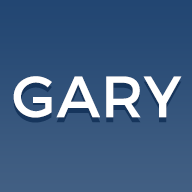
<style>
.page{position:relative;width:192px;height:192px}
.page>*{position:absolute;margin:0}
.t1{font:58px "Montserrat-Regular";letter-spacing:0.015em;color:#ffffff}
.t2{font:58px "Montserrat-Regular";letter-spacing:0.015em}
</style>
<div class="page">
<p class="t1" style="left:13px;top:76px;width:169px;height:42px">GARY</p>
<p class="t2" style="left:13px;top:81px;width:169px;height:42px">GARY</p>
</div>
